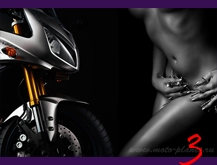
<style>
.page{position:relative;width:217px;height:165px}
.page>*{position:absolute;margin:0}
.t1{font:48px "Pristina-Regular";color:#ff0000}
</style>
<div class="page">
<p class="t1" style="left:179px;top:134px;width:23px;height:32px">3</p>
</div>
